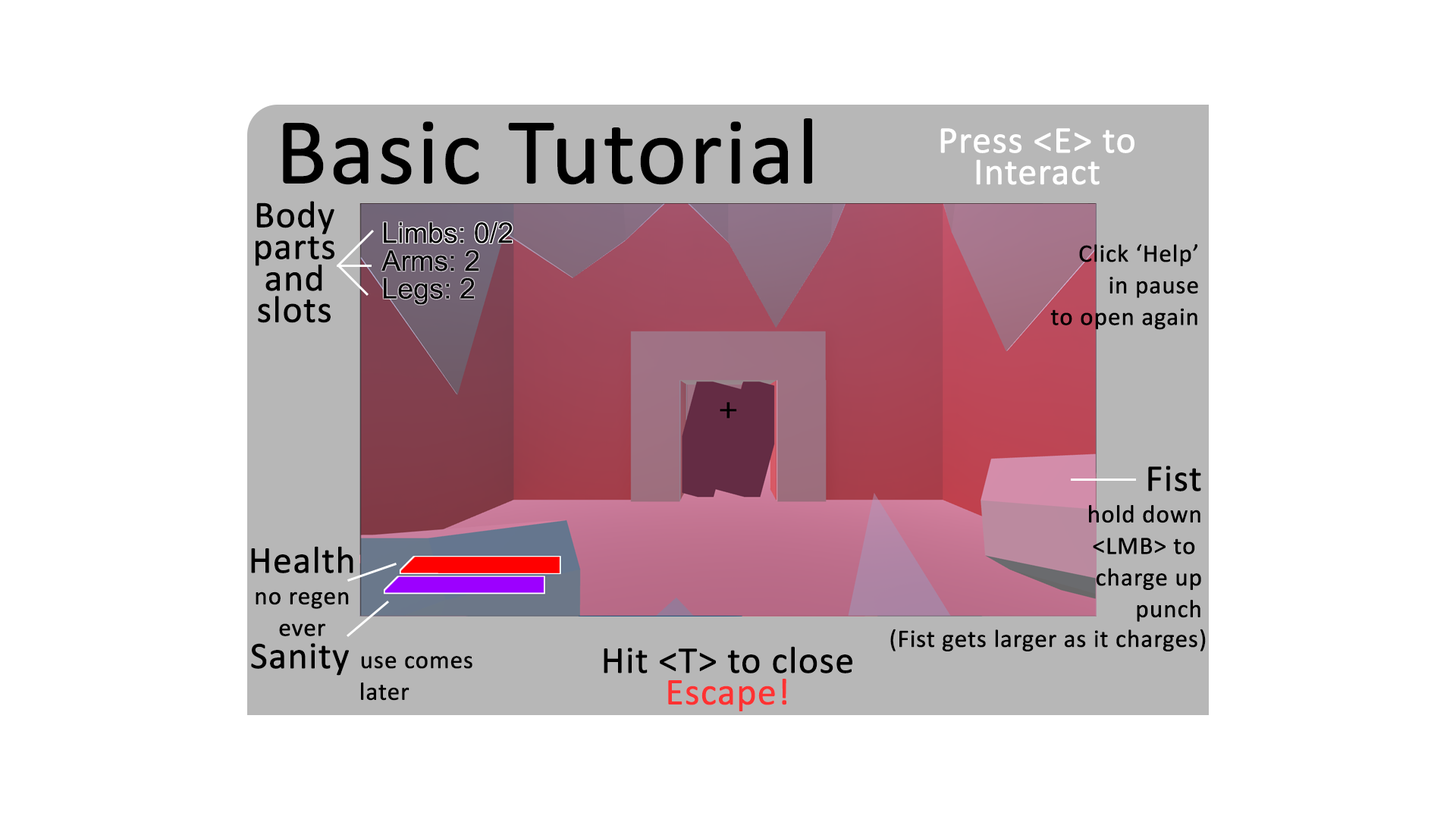
<style>
.page{position:relative;width:1456px;height:819px;background:#ffffff}
.page>*{position:absolute;margin:0}
.t1{font:94.8px "Calibri";color:#000000;font-weight:bold}
.t2{font:37.9px/31.6px "Calibri";color:#ffffff;font-weight:bold}
.t3{font:37.9px/31.6px "Calibri";color:#000000;font-weight:bold}
.t4{font:25.3px/31.6px "Calibri";color:#000000;font-weight:bold}
.t5{font:25.3px "Calibri";color:#000000;font-weight:bold}
.t6{font:37.9px/31.6px "Calibri";color:#ff3232;font-weight:bold}
</style>
<div class="page">
<p class="t1" style="left:283px;top:118px;width:529px;height:67px">Basic Tutorial</p>
<p class="t2" style="left:940px;top:128px;width:194px;height:57px;text-align:center">Press &lt;E&gt; to<br>Interact</p>
<p class="t3" style="left:256px;top:201px;width:78px;height:122px;text-align:center">Body<br>parts<br>and<br>slots</p>
<p class="t4" style="left:1050px;top:244px;width:148px;height:86px;text-align:right">Click ‘Help’<br>in pause<br>to open again</p>
<p class="t4" style="left:1089px;top:466px;width:112px;height:156px;text-align:right"><span class="t3">Fist<br></span>hold down<br>&lt;LMB&gt; to <br>charge up<br>punch</p>
<p class="t4" style="left:251px;top:546px;width:102px;height:90px;text-align:center"><span class="t3">Health<br></span>no regen<br>ever</p>
<p class="t5" style="left:890px;top:629px;width:316px;height:22px">(Fist gets larger as it charges)</p>
<p class="t4" style="left:251px;top:643px;width:221px;height:58px"><span class="t3">Sanity </span>use comes <br>    later</p>
<p class="t3" style="left:604px;top:646px;width:248px;height:65px;text-align:center">Hit &lt;T&gt; to close<br><span class="t6">Escape!</span></p>
</div>
